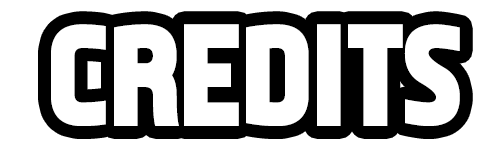
<style>
.page{position:relative;width:500px;height:150px;background:#ffffff}
.page>*{position:absolute;margin:0}
.t1{font:160px "SheSmiles";color:#ffffff}
</style>
<div class="page">
<p class="t1" style="left:51px;top:24px;width:409px;height:102px">credits</p>
</div>
